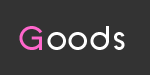
<style>
.page{position:relative;width:150px;height:75px;background:#333333}
.page>*{position:absolute;margin:0}
.t1{font:36px "SFNewRepublic";color:#ffffff}
.t2{font:36px "SFNewRepublic";color:#ff66cc}
</style>
<div class="page">
<p class="t1" style="left:19px;top:26px;width:106px;height:24px"><span class="t2">G</span>oods</p>
</div>
